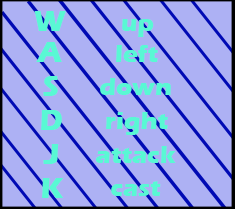
<style>
.page{position:relative;width:235px;height:209px;background:#adb1f4}
.page>*{position:absolute;margin:0}
.t1{font:30px "ErasITC-Bold";color:#59f8d4}
.t2{font:25px "ErasITC-Bold";color:#59f8d4}
</style>
<div class="page">
<p class="t1" style="left:34px;top:11px;width:32px;height:20px">W</p>
<p class="t2" style="left:122px;top:19px;width:32px;height:18px">up</p>
<p class="t1" style="left:36px;top:42px;width:26px;height:20px">A</p>
<p class="t2" style="left:116px;top:45px;width:42px;height:17px">left</p>
<p class="t1" style="left:43px;top:76px;width:15px;height:20px">S</p>
<p class="t2" style="left:100px;top:78px;width:71px;height:17px">down</p>
<p class="t1" style="left:41px;top:110px;width:21px;height:20px">D</p>
<p class="t2" style="left:106px;top:112px;width:62px;height:23px">right</p>
<p class="t1" style="left:43px;top:144px;width:16px;height:20px">J</p>
<p class="t2" style="left:96px;top:146px;width:80px;height:17px">attack</p>
<p class="t1" style="left:42px;top:178px;width:22px;height:20px">K</p>
<p class="t2" style="left:111px;top:181px;width:50px;height:15px">cast</p>
</div>
